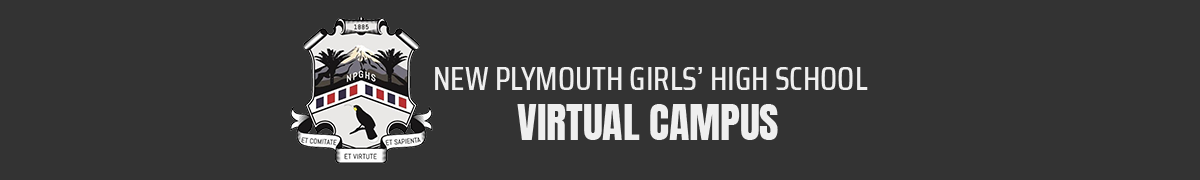
<style>
.page{position:relative;width:1200px;height:180px;background:#333333}
.page>*{position:absolute;margin:0}
.t1{font:33.3px "SairaCondensed-Medium";color:#efefef}
.t2{font:41.7px "Anton-Regular";color:#efefef}
</style>
<div class="page">
<p class="t1" style="left:435px;top:67px;width:433px;height:23px">NEW PLYMOUTH GIRLS’ HIGH SCHOOL</p>
<p class="t2" style="left:517px;top:104px;width:261px;height:36px">VIRTUAL CAMPUS</p>
</div>
